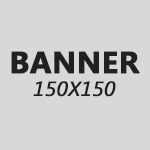
<style>
.page{position:relative;width:150px;height:150px;background:#dad7d7}
.page>*{position:absolute;margin:0}
.t1{font:30.1px "SegoeUI-Bold";color:#222020;text-transform:uppercase;font-weight:bold}
.t2{font:20.4px "SegoeUI-Italic";color:#222020;text-transform:uppercase;font-weight:bold}
</style>
<div class="page">
<p class="t1" style="left:11px;top:51px;width:129px;height:23px">BANNER</p>
<p class="t2" style="left:33px;top:81px;width:83px;height:16px">150x150</p>
</div>
